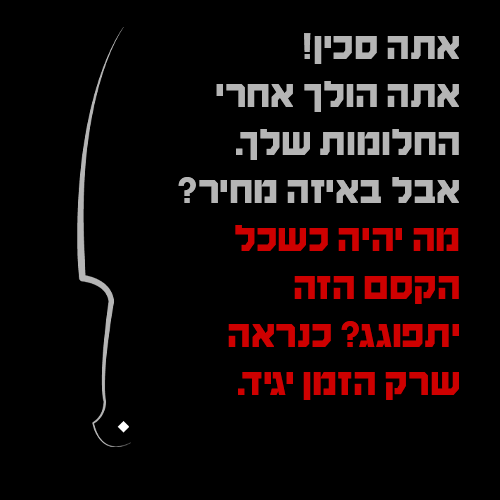
<style>
.page{position:relative;width:500px;height:500px;background:#000000}
.page>*{position:absolute;margin:0}
.t1{font:40px "HaimG-Regular";color:#b5b5b5}
.t2{font:40px "HaimG-Regular";color:#ce0000}
</style>
<div class="page">
<p class="t1" style="left:178px;top:33px;width:281px;height:367px">אתה סכין!<br>אתה הולך אחרי החלומות שלך. אבל באיזה מחיר? <span class="t2">מה יהיה כשכל הקסם הזה יתפוגג? כנראה שרק הזמן יגיד.</span></p>
</div>
